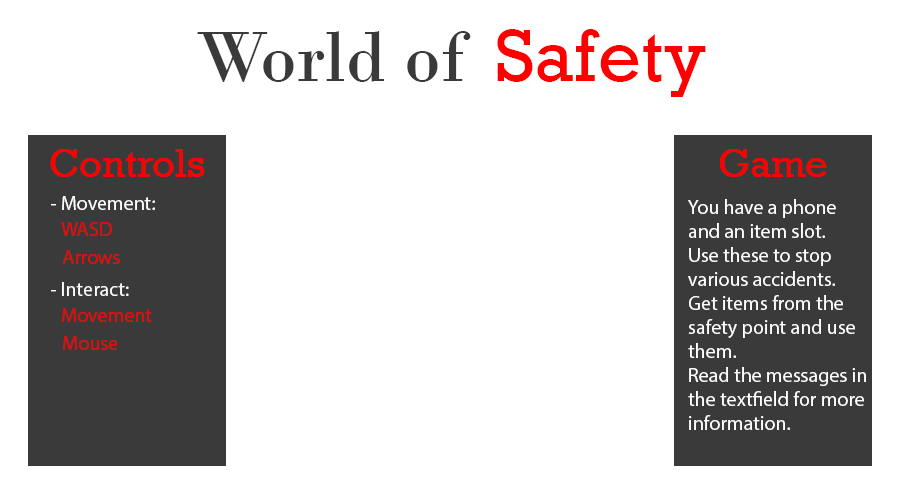
<style>
.page{position:relative;width:900px;height:500px;background:#ffffff}
.page>*{position:absolute;margin:0}
.t1{font:75px "BodoniMT";color:#3a3a3a}
.t2{font:75px "Rockwell";color:#ff0000}
.t3{font:40px "Rockwell";color:#ff0000}
.t4{font:20px "MyriadPro-Regular";color:#ffffff}
.t5{font:20px "MyriadPro-Regular";color:#eb0707}
</style>
<div class="page">
<p class="t1" style="left:197px;top:29px;width:509px;height:68px">World of <span class="t2">Safety</span></p>
<p class="t3" style="left:50px;top:149px;width:155px;height:28px">Controls</p>
<p class="t3" style="left:719px;top:149px;width:108px;height:28px">Game</p>
<p class="t4" style="left:51px;top:196px;width:104px;height:14px">- Movement:</p>
<p class="t4" style="left:688px;top:199px;width:178px;height:231px">You have a phone<br>and an item slot.<br>Use these to stop <br>various accidents.<br>Get items from the <br>safety point and use <br>them.<br>Read the messages in<br>the textfield for more<br>information.</p>
<p class="t5" style="left:61px;top:222px;width:51px;height:14px">WASD</p>
<p class="t5" style="left:62px;top:250px;width:58px;height:14px">Arrows</p>
<p class="t4" style="left:51px;top:282px;width:78px;height:14px">- Interact:</p>
<p class="t5" style="left:62px;top:308px;width:90px;height:14px">Movement</p>
<p class="t5" style="left:63px;top:336px;width:54px;height:14px">Mouse</p>
</div>
